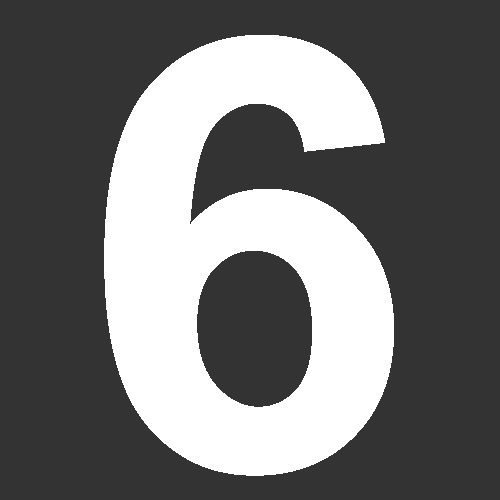
<style>
.page{position:relative;width:500px;height:500px;background:#333333}
.page>*{position:absolute;margin:0}
.t1{font:600px "Arial-BoldMT";color:#ffffff}
</style>
<div class="page">
<p class="t1" style="left:104px;top:35px;width:290px;height:441px">6</p>
</div>
